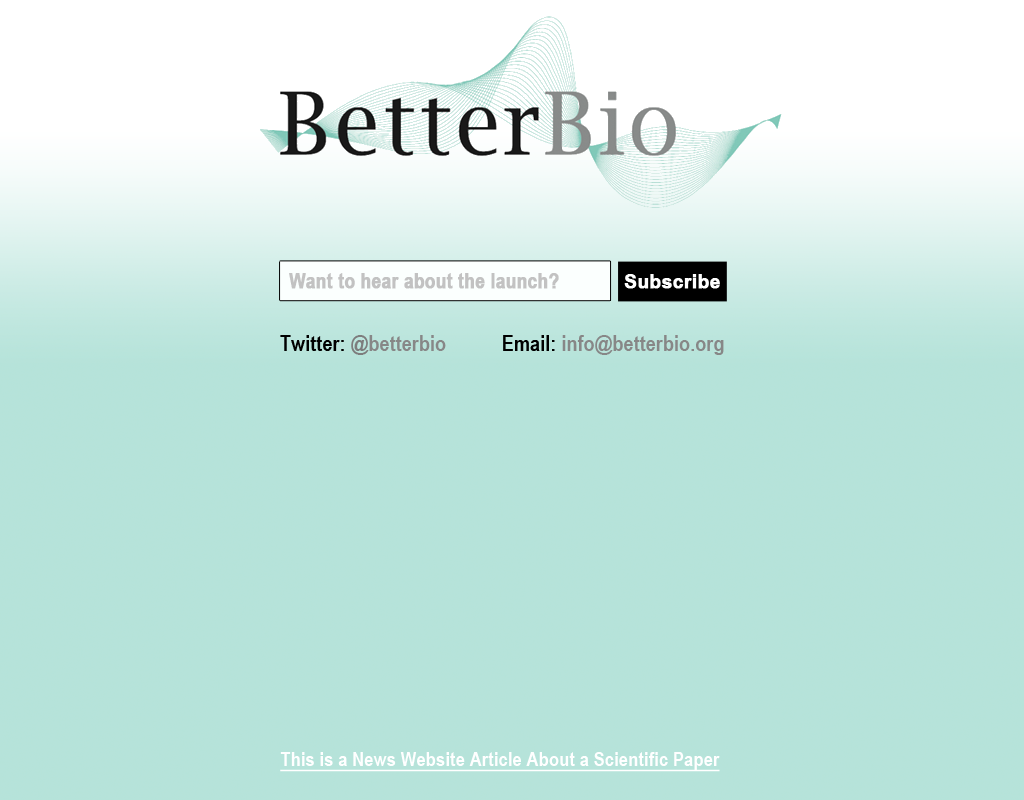
<style>
.page{position:relative;width:1024px;height:800px;background:#b6e3da}
.page>*{position:absolute;margin:0}
.t1{font:20.7px "ArialNarrow-Bold";color:#c2c2c2;font-weight:bold}
.t2{font:19.6px "ArialNarrow-Bold";color:#ffffff;font-weight:bold;scale:1.18 1}
.t3{font:22.2px "ArialNarrow-Bold";color:#878787}
.t4{font:22.2px "ArialNarrow-Bold";color:#000000}
.t5{font:22.2px "ArialNarrow-Bold";color:#7d7d7d}
.t6{font:20.5px "ArialNarrow-Bold";color:#ffffff;text-decoration:underline}
</style>
<div class="page">
<p class="t1" style="left:289px;top:273px;width:270px;height:16px">Want to hear about the launch?</p>
<p class="t2" style="left:624px;top:274px;width:96px;height:15px">Subscribe</p>
<p class="t3" style="left:280px;top:335px;width:444px;height:20px"><span class="t4">Twitter: </span><span class="t5">@</span>betterbio           <span class="t4">Email: </span>info@betterbio.org</p>
<p class="t6" style="left:280px;top:752px;width:440px;height:20px">This is a News Website Article About a Scientific Paper</p>
</div>
